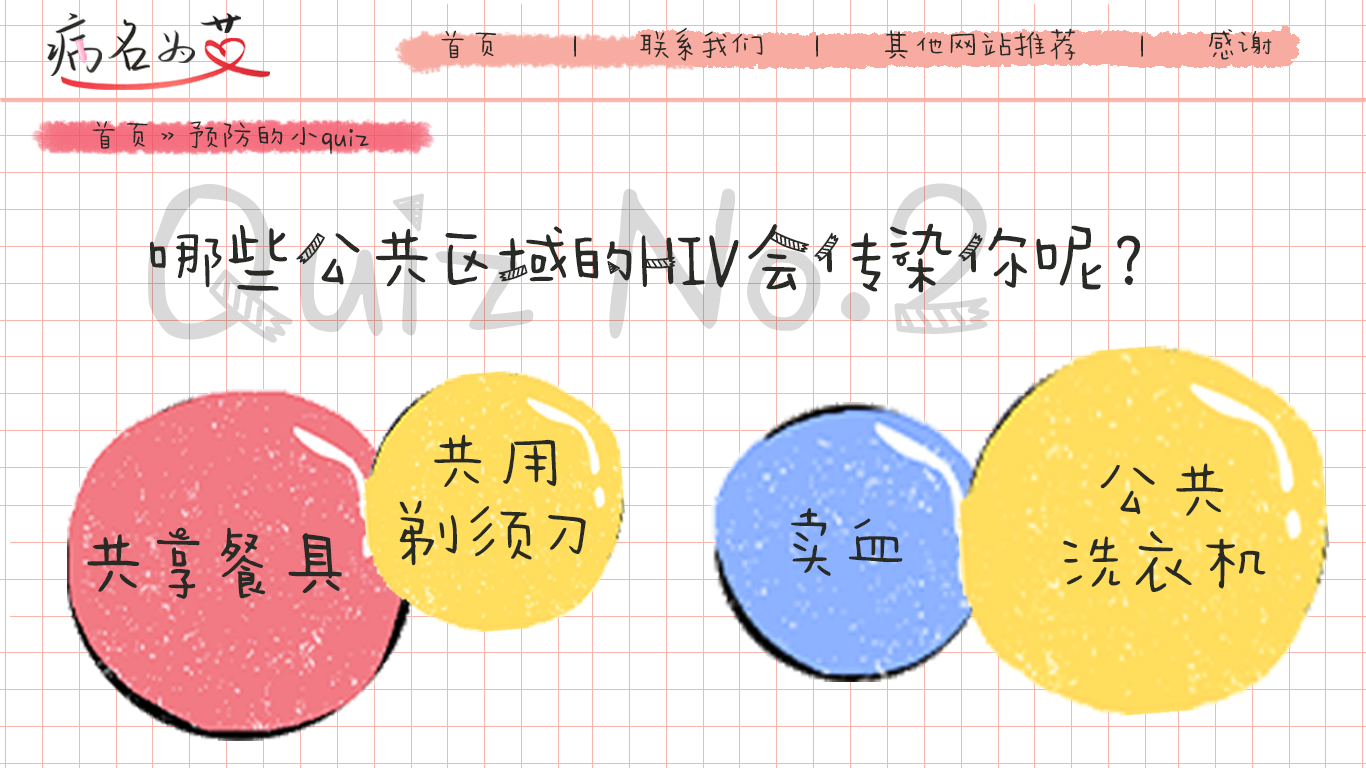
<style>
.page{position:relative;width:1366px;height:768px;background:#ffffff}
.page>*{position:absolute;margin:0}
.t1{font:33.3px "AaWanWan";color:#282a26}
.t2{font:72px "AaPaperTape";color:#282a26}
.t3{font:72px/72px "AaWanWan";color:#282a26}
.t4{font:72px "AaWanWan";color:#282a26}
</style>
<div class="page">
<p class="t1" style="left:441px;top:27px;width:831px;height:34px">首页       |      联系我们     |      其他网站推荐      |      感谢</p>
<p class="t1" style="left:92px;top:121px;width:277px;height:34px">首页》预防的小quiz</p>
<p class="t2" style="left:150px;top:223px;width:990px;height:70px">哪些公共区域的HIV会传染你呢？</p>
<p class="t3" style="left:399px;top:434px;width:187px;height:132px;text-align:center">共用<br>剃须刀</p>
<p class="t3" style="left:1063px;top:463px;width:203px;height:129px;text-align:center">公共<br>洗衣机</p>
<p class="t4" style="left:791px;top:508px;width:112px;height:68px">卖血</p>
<p class="t2" style="left:87px;top:527px;width:255px;height:72px">共享餐具</p>
</div>
